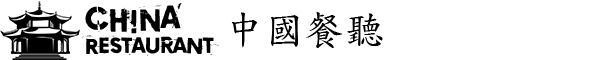
<style>
.page{position:relative;width:600px;height:60px;background:#ffffff}
.page>*{position:absolute;margin:0}
.t1{font:32px "Copycat759";color:#000000}
.t2{font:40px "DFKaiShu-SB-Estd-BF";color:#000000}
.t3{font:22px "Copycat759";color:#000000}
</style>
<div class="page">
<p class="t1" style="left:85px;top:3px;width:97px;height:31px">CHINA</p>
<p class="t2" style="left:231px;top:12px;width:152px;height:36px">中國餐聽</p>
<p class="t3" style="left:81px;top:35px;width:138px;height:21px">Restaurant</p>
</div>
